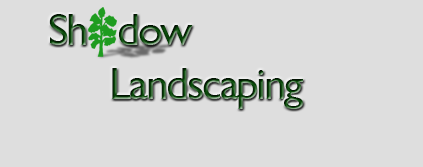
<style>
.page{position:relative;width:423px;height:167px;background:#dedede}
.page>*{position:absolute;margin:0}
.t1{font:45px "GillSans";letter-spacing:-0.05em}
</style>
<div class="page">
<p class="t1" style="left:49px;top:14px;width:254px;height:95px">Sh   dow <br>      Landscaping</p>
</div>
